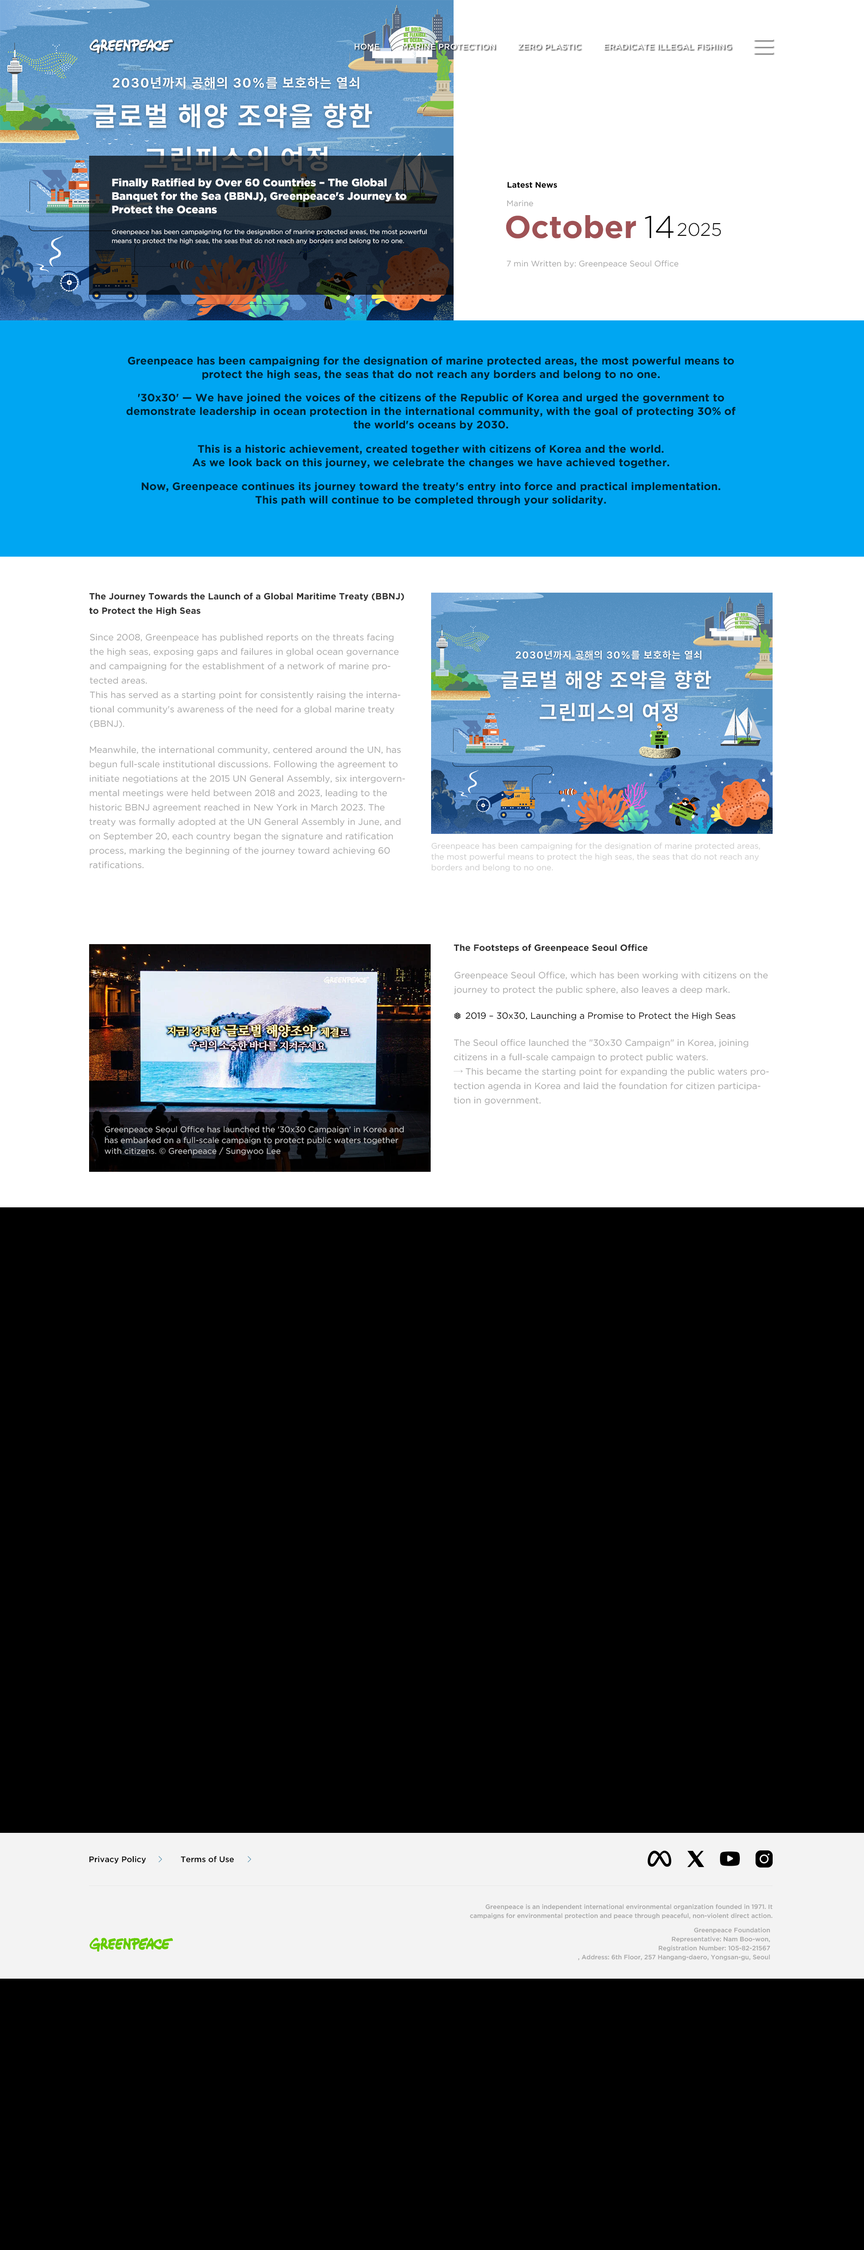
<style>
.page{position:relative;width:864px;height:2250px;background:#000000}
.page>*{position:absolute;margin:0}
.t1{font:8.1px "GothamPro-Medium";color:#ffffff}
.t2{font:8.1px "GothamPro-Medium";color:#ffffff;text-transform:uppercase}
.t3{font:10.8px/13.5px "GothamPro-Black";color:#ffffff}
.t4{font:8.1px "GothamPro-Bold";color:#000000}
.t5{font:8.1px "GothamPro";color:#a6a6a6}
.t6{font:31.5px "GothamPro-Bold";color:#9f5255}
.t7{font:31.5px "GothamPro-Light";color:#000000}
.t8{font:6.3px/9px "GothamPro";color:#ffffff}
.t9{font:18px "GothamPro-Light";color:#000000}
.t10{font:10.8px/13.5px "GothamPro-Bold";color:#002333}
.t11{font:9px/14.4px "GothamPro-Bold";color:#333333}
.t12{font:9px/14.4px "GothamPro";color:#a6a6a6}
.t13{font:8.1px/10.8px "GothamPro";color:#cccccc}
.t14{font:9px "GothamPro-Bold";color:#333333}
.t15{font:9px "GothamPro";color:#000000}
.t16{font:9px/14.4px "AppleGothic";color:#a6a6a6}
.t17{font:8.1px "GothamPro-Medium";color:#000000}
.t18{font:6.3px/9px "GothamPro-Medium";color:#a6a6a6}
</style>
<div class="page">
<p class="t1" style="left:355px;top:44px;width:24px;height:6px">HOME</p>
<p class="t2" style="left:402px;top:44px;width:93px;height:6px">Marine protection</p>
<p class="t2" style="left:518px;top:44px;width:63px;height:6px">Zero plastic</p>
<p class="t2" style="left:604px;top:44px;width:127px;height:6px">Eradicate illegal fishing</p>
<p class="t3" style="left:112px;top:178px;width:294px;height:36px">Finally Ratified by Over 60 Countries – The Global Banquet for the Sea (BBNJ), Greenpeace's Journey to Protect the Oceans</p>
<p class="t4" style="left:508px;top:182px;width:49px;height:6px">Latest News</p>
<p class="t5" style="left:507px;top:200px;width:26px;height:7px">Marine</p>
<p class="t6" style="left:506px;top:215px;width:130px;height:23px">October</p>
<p class="t7" style="left:645px;top:216px;width:29px;height:22px">14</p>
<p class="t8" style="left:112px;top:229px;width:315px;height:15px">Greenpeace has been campaigning for the designation of marine protected areas, the most powerful means to protect the high seas, the seas that do not reach any borders and belong to no one.</p>
<p class="t9" style="left:677px;top:223px;width:44px;height:13px">2025</p>
<p class="t5" style="left:507px;top:260px;width:172px;height:8px">7 min Written by: Greenpeace Seoul Office</p>
<p class="t10" style="left:128px;top:356px;width:606px;height:24px;text-align:center">Greenpeace has been campaigning for the designation of marine protected areas, the most powerful means to protect the high seas, the seas that do not reach any borders and belong to no one.</p>
<p class="t10" style="left:126px;top:393px;width:610px;height:37px;text-align:center">'30x30' — We have joined the voices of the citizens of the Republic of Korea and urged the government to demonstrate leadership in ocean protection in the international community, with the goal of protecting 30% of the world's oceans by 2030.</p>
<p class="t10" style="left:192px;top:445px;width:477px;height:23px;text-align:center">This is a historic achievement, created together with citizens of Korea and the world.<br>As we look back on this journey, we celebrate the changes we have achieved together.</p>
<p class="t10" style="left:142px;top:482px;width:578px;height:23px;text-align:center">Now, Greenpeace continues its journey toward the treaty's entry into force and practical implementation.<br>This path will continue to be completed through your solidarity.</p>
<p class="t11" style="left:89px;top:593px;width:315px;height:23px">The Journey Towards the Launch of a Global Maritime Treaty (BBNJ) to Protect the High Seas</p>
<p class="t12" style="left:90px;top:634px;width:310px;height:94px">Since 2008, Greenpeace has published reports on the threats facing the high seas, exposing gaps and failures in global ocean governance and campaigning for the establishment of a network of marine protected areas.<br>This has served as a starting point for consistently raising the international community's awareness of the need for a global marine treaty (BBNJ).</p>
<p class="t12" style="left:89px;top:746px;width:316px;height:122px">Meanwhile, the international community, centered around the UN, has begun full-scale institutional discussions. Following the agreement to initiate negotiations at the 2015 UN General Assembly, six intergovernmental meetings were held between 2018 and 2023, leading to the historic BBNJ agreement reached in New York in March 2023. The treaty was formally adopted at the UN General Assembly in June, and on September 20, each country began the signature and ratification process, marking the beginning of the journey toward achieving 60 ratifications.</p>
<p class="t13" style="left:431px;top:842px;width:329px;height:30px">Greenpeace has been campaigning for the designation of marine protected areas, the most powerful means to protect the high seas, the seas that do not reach any borders and belong to no one.</p>
<p class="t14" style="left:454px;top:944px;width:194px;height:9px">The Footsteps of Greenpeace Seoul Office</p>
<p class="t12" style="left:454px;top:972px;width:314px;height:22px">Greenpeace Seoul Office, which has been working with citizens on the journey to protect the public sphere, also leaves a deep mark.</p>
<p class="t15" style="left:465px;top:1012px;width:270px;height:9px">2019 – 30x30, Launching a Promise to Protect the High Seas</p>
<p class="t12" style="left:454px;top:1039px;width:315px;height:66px">The Seoul office launched the "30x30 Campaign" in Korea, joining citizens in a full-scale campaign to protect public waters.<br><span class="t16">→</span> This became the starting point for expanding the public waters protection agenda in Korea and laid the foundation for citizen participation in government.</p>
<p class="t13" style="left:104px;top:1126px;width:300px;height:30px">Greenpeace Seoul Office has launched the '30x30 Campaign' in Korea and has embarked on a full-scale campaign to protect public waters together with citizens. © Greenpeace / Sungwoo Lee</p>
<p class="t17" style="left:89px;top:1856px;width:57px;height:7px">Privacy Policy</p>
<p class="t17" style="left:181px;top:1856px;width:53px;height:7px">Terms of Use</p>
<p class="t18" style="left:470px;top:1904px;width:303px;height:15px;text-align:right">Greenpeace is an independent international environmental organization founded in 1971. It campaigns for environmental protection and peace through peaceful, non-violent direct action.</p>
<p class="t18" style="left:578px;top:1927px;width:192px;height:34px;text-align:right">Greenpeace Foundation<br>Representative: Nam Boo-won,<br>Registration Number: 105-82-21567<br>, Address: 6th Floor, 257 Hangang-daero, Yongsan-gu, Seoul</p>
</div>
